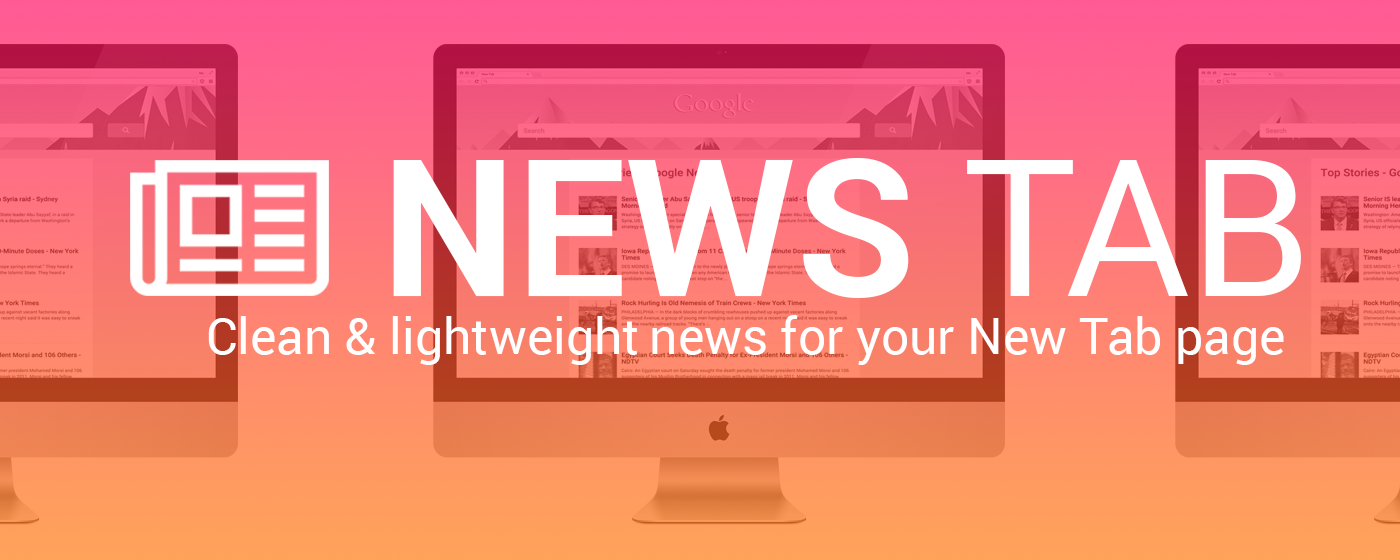
<style>
.page{position:relative;width:1400px;height:560px}
.page>*{position:absolute;margin:0}
.t1{font:191px "Roboto-Bold";color:#ffffff}
.t2{font:191px "Roboto-Regular";color:#ffffff}
.t3{font:50px "Roboto-Regular";color:#ffffff}
</style>
<div class="page">
<p class="t1" style="left:393px;top:158px;width:908px;height:140px">NEWS <span class="t2">TAB</span></p>
<p class="t3" style="left:208px;top:315px;width:1076px;height:50px">Clean &amp; lightweight news for your New Tab page</p>
</div>
